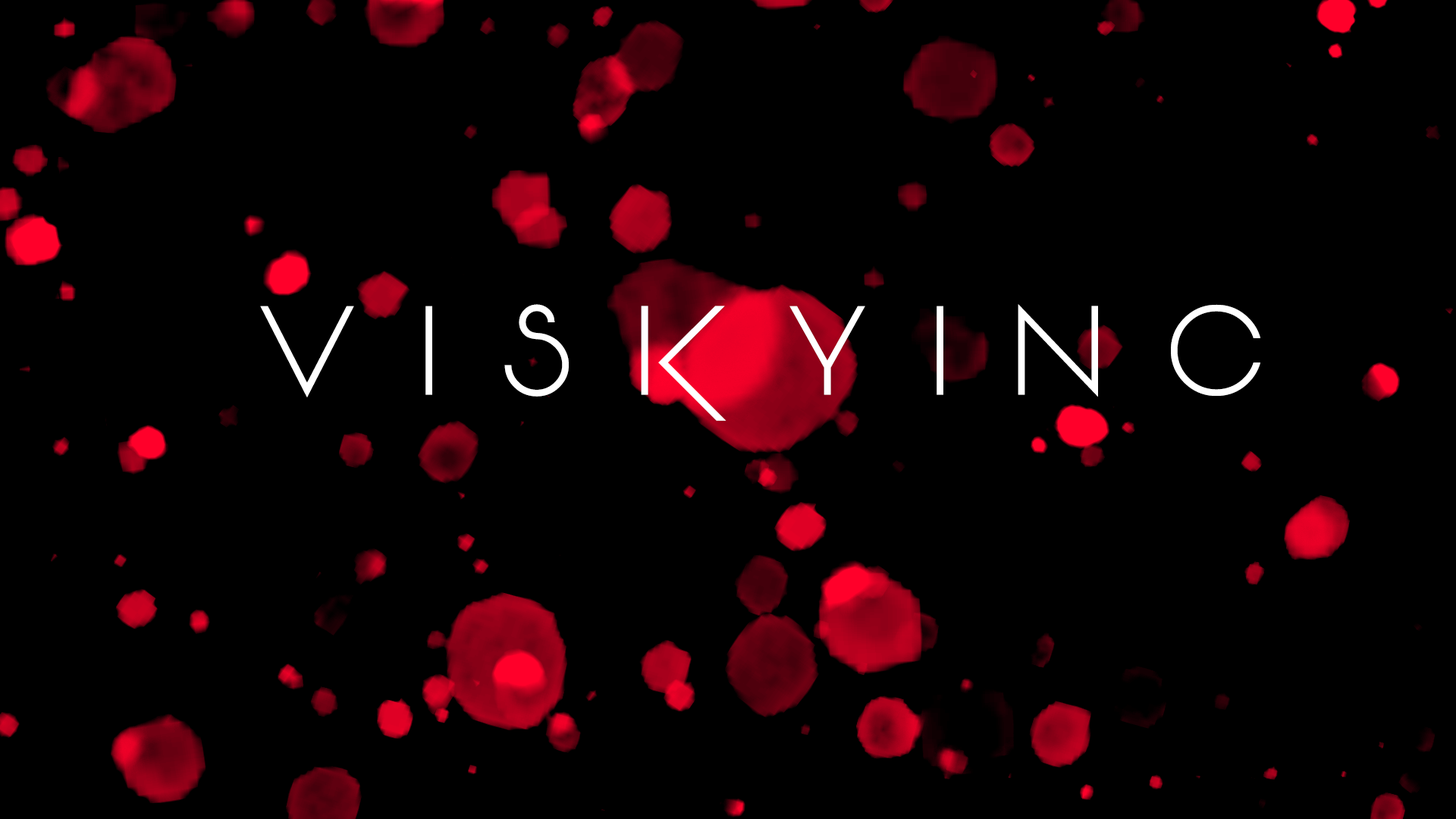
<style>
.page{position:relative;width:1456px;height:819px;background:#000000}
.page>*{position:absolute;margin:0}
.t1{font:126.4px "Vonique92";letter-spacing:0.15em;color:#ffffff}
</style>
<div class="page">
<p class="t1" style="left:260px;top:304px;width:1000px;height:117px">V I S K Y I N C</p>
</div>
